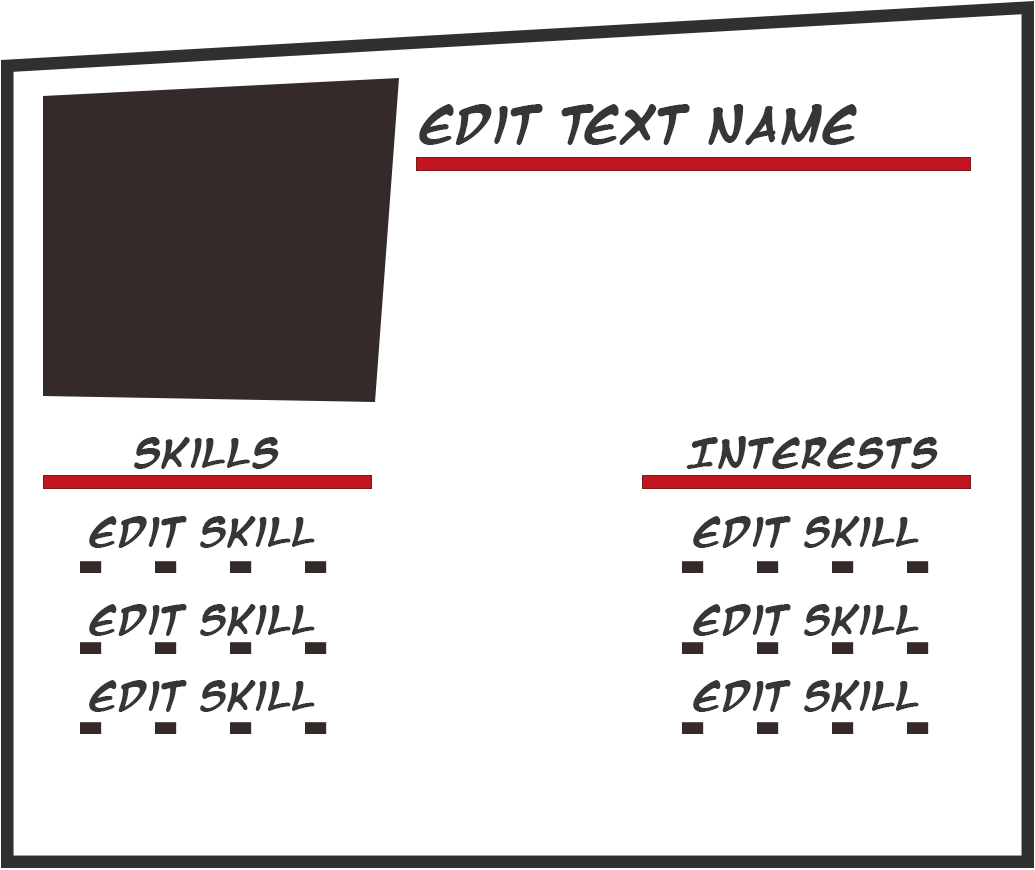
<style>
.page{position:relative;width:1035px;height:870px;background:#ffffff}
.page>*{position:absolute;margin:0}
.t1{font:41.7px "MangaTempleBold";color:#383535}
.t2{font:33.4px "MangaTempleBold";color:#383535}
.t3{font:33.3px "MangaTempleBold";color:#383535}
</style>
<div class="page">
<p class="t1" style="left:419px;top:104px;width:438px;height:41px">Edit Text Name</p>
<p class="t2" style="left:134px;top:437px;width:145px;height:32px">Skills</p>
<p class="t2" style="left:686px;top:436px;width:252px;height:33px">Interests</p>
<p class="t3" style="left:89px;top:516px;width:226px;height:32px">Edit Skill</p>
<p class="t3" style="left:693px;top:516px;width:226px;height:32px">Edit Skill</p>
<p class="t3" style="left:89px;top:604px;width:226px;height:32px">Edit Skill</p>
<p class="t3" style="left:693px;top:604px;width:226px;height:32px">Edit Skill</p>
<p class="t3" style="left:89px;top:680px;width:226px;height:32px">Edit Skill</p>
<p class="t3" style="left:693px;top:680px;width:226px;height:32px">Edit Skill</p>
</div>
